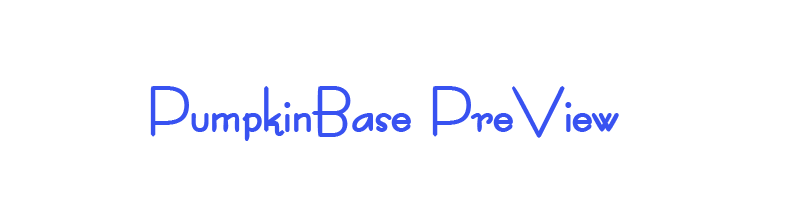
<style>
.page{position:relative;width:800px;height:200px;background:#ffffff}
.page>*{position:absolute;margin:0}
.t1{font:72px "STROKE-Normal";color:#3852f2}
</style>
<div class="page">
<p class="t1" style="left:150px;top:86px;width:469px;height:55px">PumpkinBase PreView</p>
</div>
